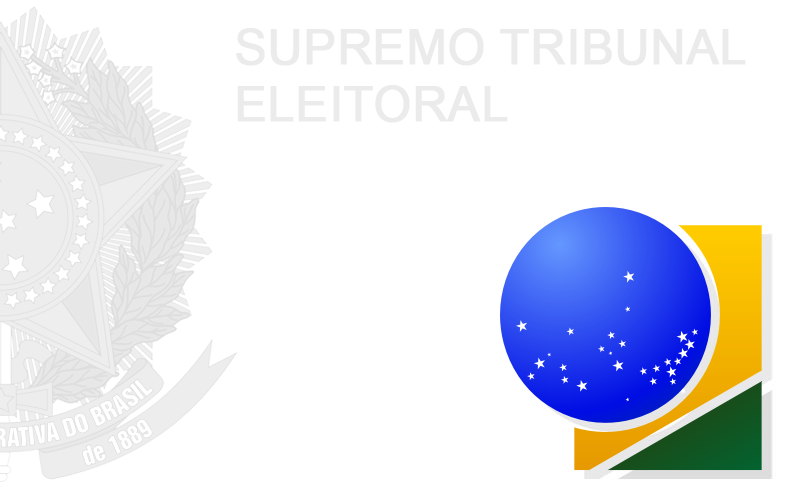
<style>
.page{position:relative;width:785px;height:492px;background:#ffffff}
.page>*{position:absolute;margin:0}
.t1{font:47.8px "ArialMT";color:#ebebeb;font-weight:bold}
</style>
<div class="page">
<p class="t1" style="left:236px;top:28px;width:510px;height:95px;text-align:right">SUPREMO TRIBUNAL<br>ELEITORAL</p>
</div>
